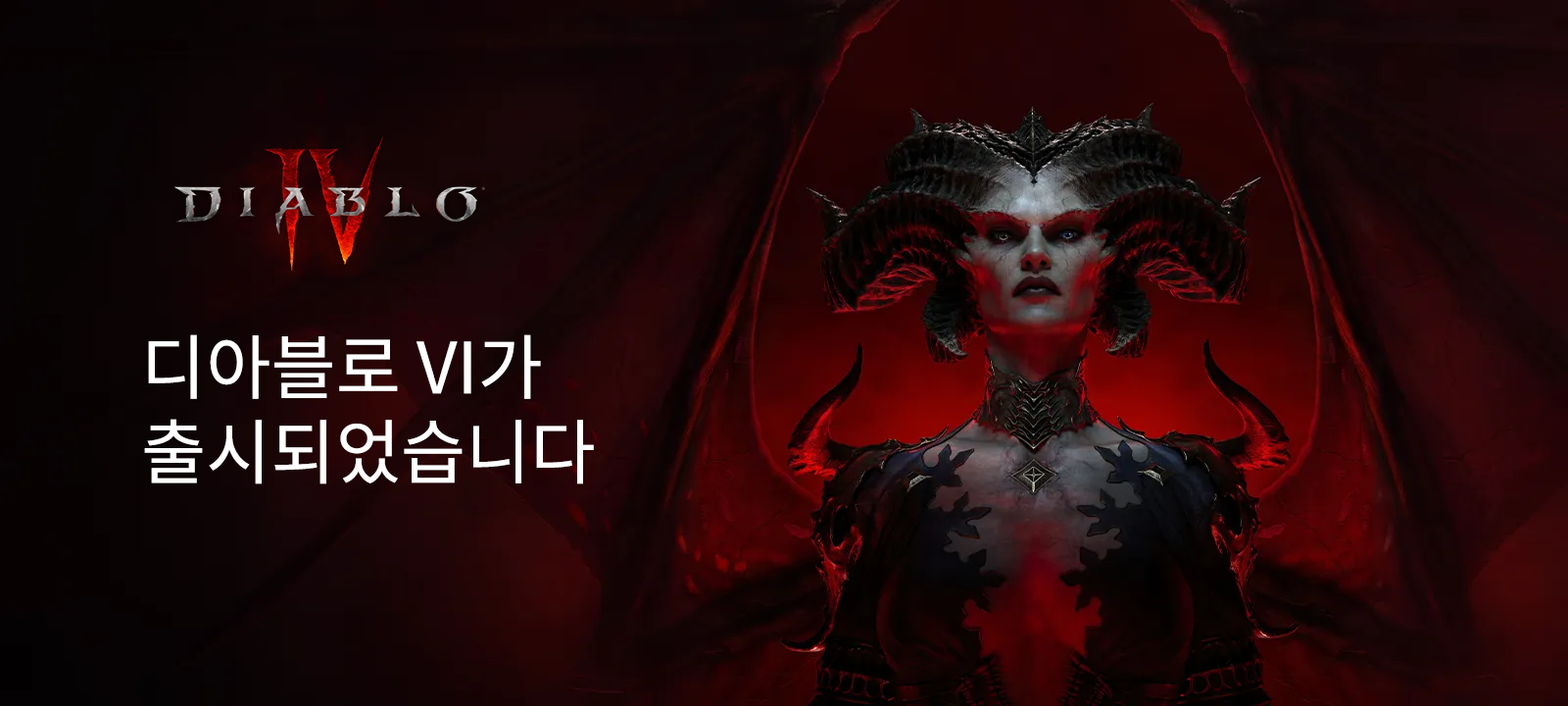
<style>
.page{position:relative;width:1568px;height:706px}
.page>*{position:absolute;margin:0}
.t1{font:70.6px "NotoSansKR-Regular";color:#ffffff}
</style>
<div class="page">
<p class="t1" style="left:144px;top:334px;width:450px;height:150px">디아블로 VI가<br>출시되었습니다</p>
</div>
